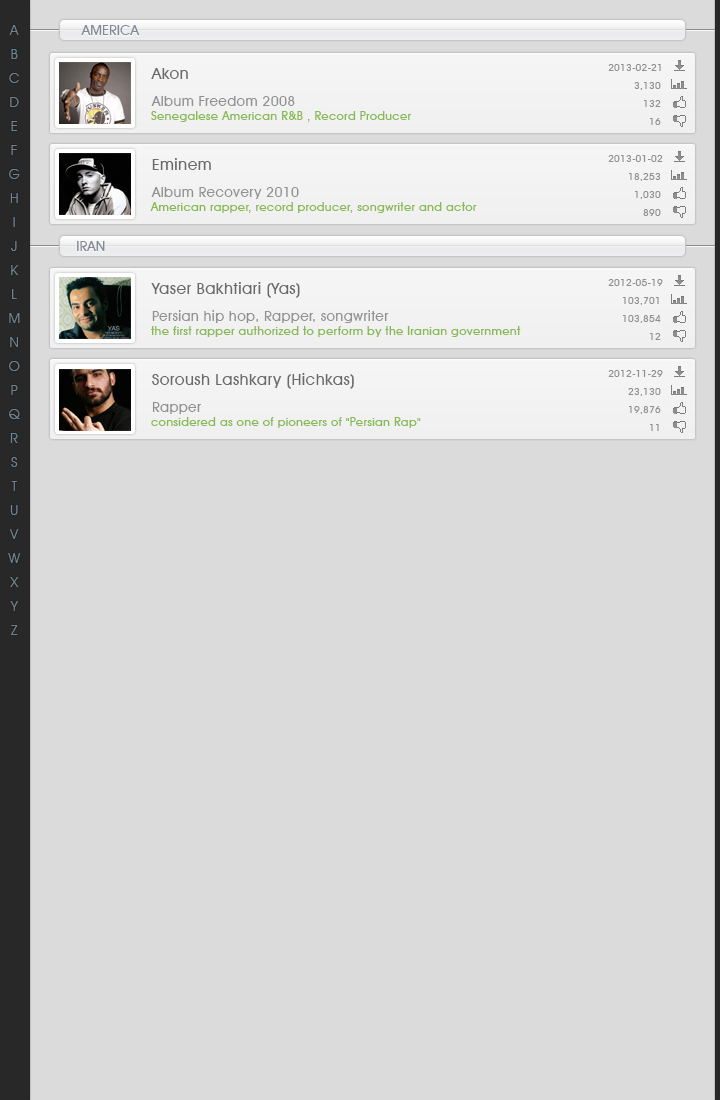
<style>
.page{position:relative;width:720px;height:1100px;background:#dbdbdb}
.page>*{position:absolute;margin:0}
.t1{font:14px/24px "AvantGardeITCbyBT-Book";color:#71838e}
.t2{font:14px "AvantGardeITCbyBT-Medium";color:#828a95}
.t3{font:10px "AvantGardeITCbyBT-Medium";letter-spacing:0.025em;color:#909090}
.t4{font:16px "AvantGardeITCbyBT-Medium";letter-spacing:0.025em;color:#6a6a6a}
.t5{font:14px "AvantGardeITCbyBT-Medium";letter-spacing:0.025em;color:#919191}
.t6{font:12px "AvantGardeITCbyBT-Medium";letter-spacing:0.025em;color:#87ba53}
</style>
<div class="page">
<p class="t1" style="left:8px;top:25px;width:13px;height:610px;text-align:center">A<br>B<br>C<br>D<br>E<br>F<br>G<br>H<br>I<br>J<br>K<br>L<br>M<br>N<br>O<br>P<br>Q<br>R<br>S<br>T<br>U<br>V<br>W<br>X<br>Y<br>Z</p>
<p class="t2" style="left:81px;top:25px;width:59px;height:10px">AMERICA</p>
<p class="t3" style="left:608px;top:64px;width:53px;height:7px">21-02-2013</p>
<p class="t4" style="left:151px;top:68px;width:37px;height:11px">Akon</p>
<p class="t3" style="left:634px;top:82px;width:27px;height:8px">3,130</p>
<p class="t5" style="left:151px;top:96px;width:144px;height:10px">Album Freedom 2008</p>
<p class="t3" style="left:644px;top:100px;width:17px;height:7px">132</p>
<p class="t6" style="left:151px;top:111px;width:260px;height:11px">Senegalese American R&amp;B , Record Producer</p>
<p class="t3" style="left:650px;top:118px;width:11px;height:7px">16</p>
<p class="t4" style="left:152px;top:158px;width:59px;height:12px">Eminem</p>
<p class="t3" style="left:608px;top:155px;width:55px;height:7px">02-01-2013</p>
<p class="t3" style="left:629px;top:173px;width:31px;height:8px">18,253</p>
<p class="t5" style="left:151px;top:187px;width:148px;height:12px">Album Recovery 2010</p>
<p class="t3" style="left:635px;top:191px;width:26px;height:8px">1,030</p>
<p class="t6" style="left:150px;top:202px;width:327px;height:11px">American rapper, record producer, songwriter and actor</p>
<p class="t3" style="left:643px;top:209px;width:18px;height:7px">890</p>
<p class="t2" style="left:77px;top:241px;width:28px;height:10px">IRAN</p>
<p class="t3" style="left:608px;top:279px;width:55px;height:7px">19-05-2012</p>
<p class="t4" style="left:151px;top:282px;width:149px;height:16px">Yaser Bakhtiari (Yas)</p>
<p class="t3" style="left:623px;top:297px;width:36px;height:8px">103,701</p>
<p class="t5" style="left:152px;top:310px;width:237px;height:13px">Persian hip hop, Rapper, songwriter</p>
<p class="t3" style="left:623px;top:315px;width:38px;height:8px">103,854</p>
<p class="t6" style="left:151px;top:326px;width:370px;height:11px">the first rapper authorized to perform by the Iranian government</p>
<p class="t3" style="left:650px;top:333px;width:11px;height:7px">12</p>
<p class="t4" style="left:152px;top:373px;width:202px;height:16px">Soroush Lashkary (Hichkas)</p>
<p class="t3" style="left:608px;top:370px;width:55px;height:7px">29-11-2012</p>
<p class="t3" style="left:628px;top:388px;width:33px;height:8px">23,130</p>
<p class="t5" style="left:152px;top:402px;width:49px;height:12px">Rapper</p>
<p class="t3" style="left:629px;top:406px;width:32px;height:8px">19,876</p>
<p class="t6" style="left:151px;top:417px;width:270px;height:11px">considered as one of pioneers of "Persian Rap"</p>
<p class="t3" style="left:650px;top:424px;width:9px;height:7px">11</p>
</div>
